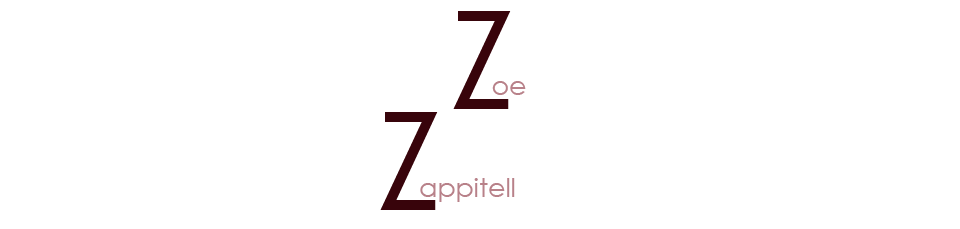
<style>
.page{position:relative;width:960px;height:229px;background:#ffffff}
.page>*{position:absolute;margin:0}
.t1{font:137.4px "CenturyGothic";color:#38040b}
.t2{font:26.7px "CenturyGothic";color:#b88189}
</style>
<div class="page">
<p class="t1" style="left:453px;top:11px;width:58px;height:98px">Z</p>
<p class="t2" style="left:492px;top:81px;width:34px;height:14px">oe</p>
<p class="t1" style="left:380px;top:112px;width:58px;height:98px">Z</p>
<p class="t2" style="left:420px;top:178px;width:95px;height:24px">appitell</p>
</div>
